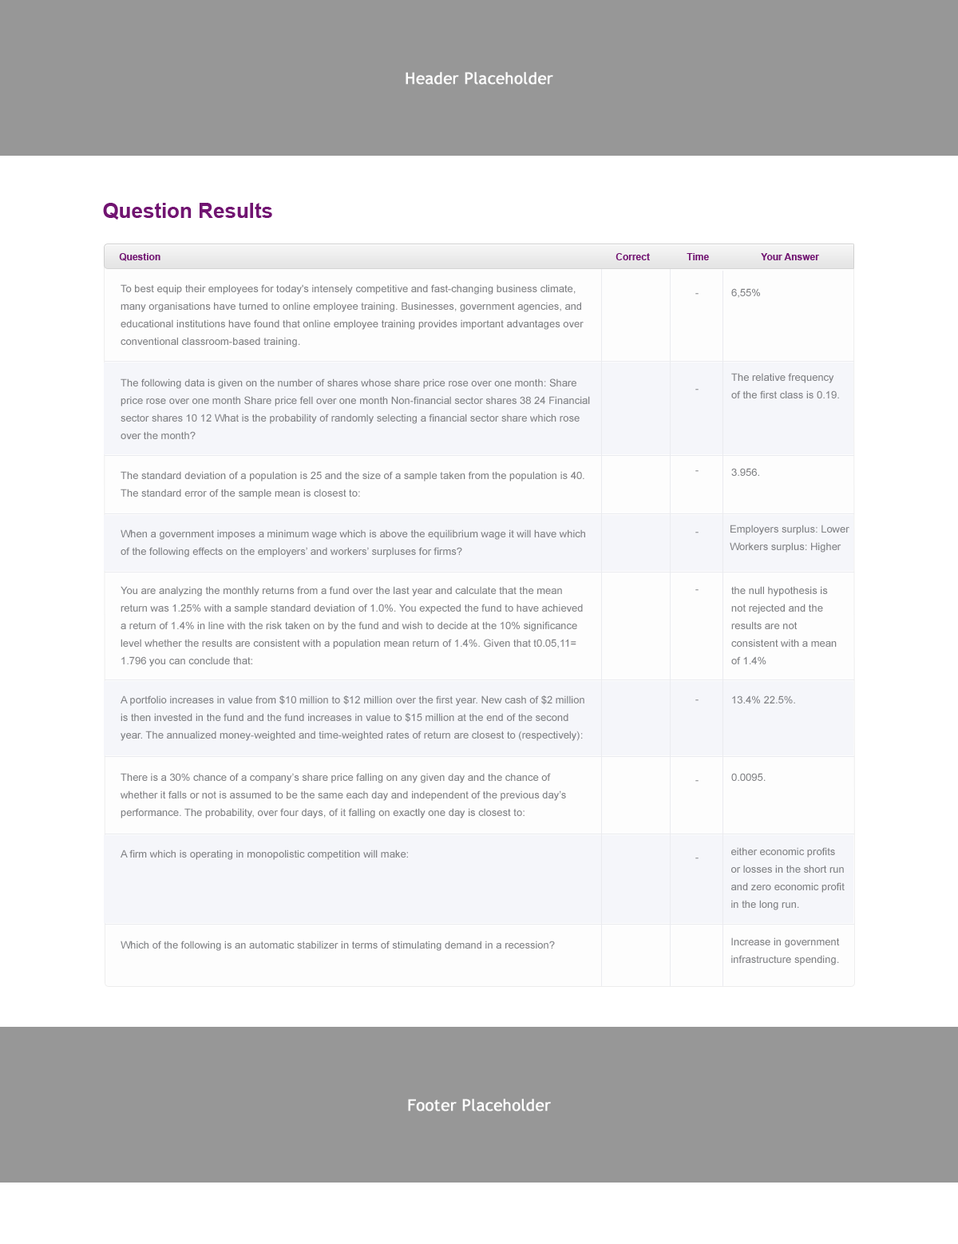
<style>
.page{position:relative;width:958px;height:1244px;background:#ffffff}
.page>*{position:absolute;margin:0}
.t1{font:16px "TrebuchetMS";color:#ffffff;font-weight:bold}
.t2{font:20.8px "Arial-BoldMT";color:#711471}
.t3{font:9.6px "Arial-BoldMT";color:#711471}
.t4{font:10.4px/17.6px "ArialMT";color:#808184}
.t5{font:10.4px "ArialMT"}
.t6{font:10.4px "ArialMT";color:#808184}
</style>
<div class="page">
<p class="t1" style="left:406px;top:72px;width:147px;height:13px">Header Placeholder</p>
<p class="t2" style="left:103px;top:203px;width:169px;height:17px">Question Results</p>
<p class="t3" style="left:119px;top:253px;width:42px;height:8px">Question</p>
<p class="t3" style="left:616px;top:253px;width:34px;height:7px">Correct</p>
<p class="t3" style="left:687px;top:253px;width:22px;height:7px">Time</p>
<p class="t3" style="left:761px;top:253px;width:58px;height:7px">Your Answer</p>
<p class="t4" style="left:121px;top:284px;width:463px;height:63px">To best equip their employees for today's intensely competitive and fast-changing business climate, many organisations have turned to online employee training. Businesses, government agencies, and educational institutions have found that online employee training provides important advantages over conventional classroom-based training.</p>
<p class="t5" style="left:696px;top:293px;width:3px;height:2px">-</p>
<p class="t6" style="left:732px;top:288px;width:28px;height:10px">6,55%</p>
<p class="t4" style="left:732px;top:373px;width:107px;height:26px">The relative frequency<br>of the first class is 0.19.</p>
<p class="t4" style="left:121px;top:379px;width:469px;height:60px">The following data is given on the number of shares whose share price rose over one month: Share price rose over one month Share price fell over one month Non-financial sector shares 38 24 Financial sector shares 10 12 What is the probability of randomly selecting a financial sector share which rose over the month?</p>
<p class="t5" style="left:696px;top:389px;width:3px;height:2px">-</p>
<p class="t4" style="left:121px;top:471px;width:464px;height:28px">The standard deviation of a population is 25 and the size of a sample taken from the population is 40. The standard error of the sample mean is closest to:</p>
<p class="t5" style="left:696px;top:470px;width:3px;height:2px">-</p>
<p class="t6" style="left:732px;top:468px;width:27px;height:8px">3.956.</p>
<p class="t4" style="left:121px;top:529px;width:464px;height:28px">When a government imposes a minimum wage which is above the equilibrium wage it will have which of the following effects on the employers’ and workers’ surpluses for firms?</p>
<p class="t5" style="left:696px;top:532px;width:3px;height:1px">-</p>
<p class="t4" style="left:730px;top:525px;width:120px;height:28px">Employers surplus: Lower<br>Workers surplus: Higher</p>
<p class="t4" style="left:121px;top:586px;width:462px;height:81px">You are analyzing the monthly returns from a fund over the last year and calculate that the mean return was 1.25% with a sample standard deviation of 1.0%. You expected the fund to have achieved a return of 1.4% in line with the risk taken on by the fund and wish to decide at the 10% significance level whether the results are consistent with a population mean return of 1.4%. Given that t0.05,11= 1.796 you can conclude that:</p>
<p class="t5" style="left:696px;top:589px;width:3px;height:2px">-</p>
<p class="t4" style="left:732px;top:586px;width:105px;height:78px">the null hypothesis is not rejected and the results are not consistent with a mean of 1.4%</p>
<p class="t4" style="left:121px;top:696px;width:464px;height:45px">A portfolio increases in value from $10 million to $12 million over the first year. New cash of $2 million is then invested in the fund and the fund increases in value to $15 million at the end of the second year. The annualized money-weighted and time-weighted rates of return are closest to (respectively):</p>
<p class="t5" style="left:696px;top:700px;width:3px;height:1px">-</p>
<p class="t6" style="left:732px;top:696px;width:63px;height:8px">13.4% 22.5%.</p>
<p class="t4" style="left:121px;top:773px;width:445px;height:46px">There is a 30% chance of a company’s share price falling on any given day and the chance of whether it falls or not is assumed to be the same each day and independent of the previous day’s performance. The probability, over four days, of it falling on exactly one day is closest to:</p>
<p class="t6" style="left:732px;top:773px;width:34px;height:8px">0.0095.</p>
<p class="t5" style="left:696px;top:780px;width:3px;height:2px">-</p>
<p class="t6" style="left:121px;top:850px;width:287px;height:10px">A firm which is operating in monopolistic competition will make:</p>
<p class="t5" style="left:696px;top:858px;width:3px;height:1px">-</p>
<p class="t4" style="left:732px;top:847px;width:113px;height:63px">either economic profits or losses in the short run and zero economic profit in the long run.</p>
<p class="t6" style="left:121px;top:941px;width:434px;height:10px">Which of the following is an automatic stabilizer in terms of stimulating demand in a recession?</p>
<p class="t4" style="left:732px;top:938px;width:108px;height:28px">Increase in government infrastructure spending.</p>
<p class="t1" style="left:408px;top:1099px;width:143px;height:13px">Footer Placeholder</p>
</div>
